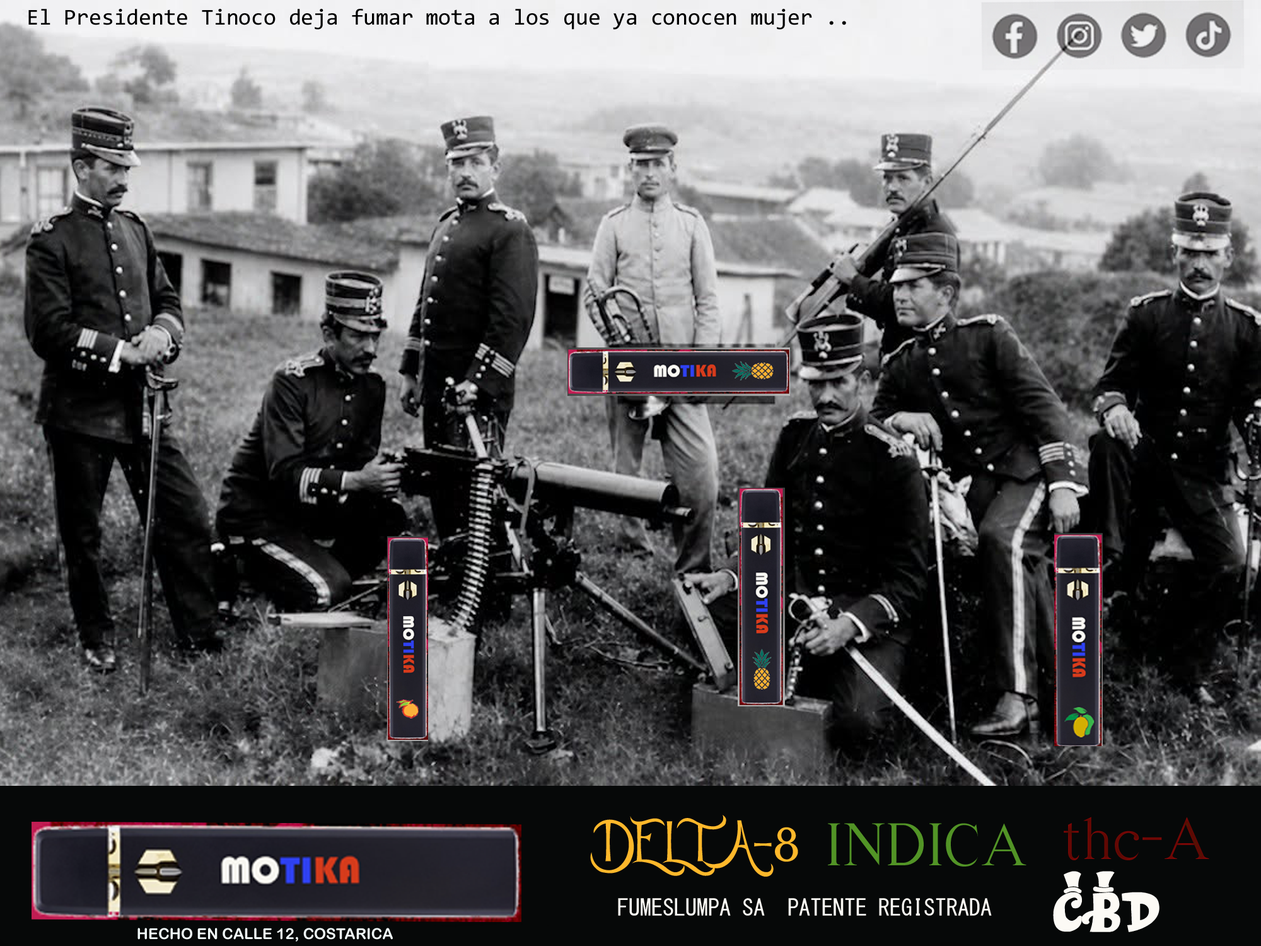
<style>
.page{position:relative;width:1261px;height:946px}
.page>*{position:absolute;margin:0}
.t1{font:22.7px "Consolas";color:#000000}
.t2{font:61.6px "Wanker";color:#ffb82b}
.t3{font:61.6px "EuroRoman";color:#529426}
.t4{font:65.5px "WillyWonka";color:#fcfaf5;scale:1.05 1}
.t5{font:22.7px "MS-Gothic";color:#fcfaf5}
.t6{font:15.1px "ArialRoundedMTBold";color:#f1f9f9}
</style>
<div class="page">
<p class="t1" style="left:28px;top:9px;width:818px;height:21px">El Presidente Tinoco deja fumar mota a los que ya conocen mujer ..</p>
<p class="t2" style="left:590px;top:815px;width:208px;height:61px">DELTA-8</p>
<p class="t3" style="left:828px;top:823px;width:198px;height:43px">INDICA</p>
<p class="t4" style="left:1053px;top:871px;width:106px;height:61px">CBD</p>
<p class="t5" style="left:618px;top:898px;width:374px;height:17px">FUMESLUMPA SA  PATENTE REGISTRADA</p>
<p class="t6" style="left:137px;top:927px;width:256px;height:14px">HECHO EN CALLE 12, COSTARICA</p>
</div>
